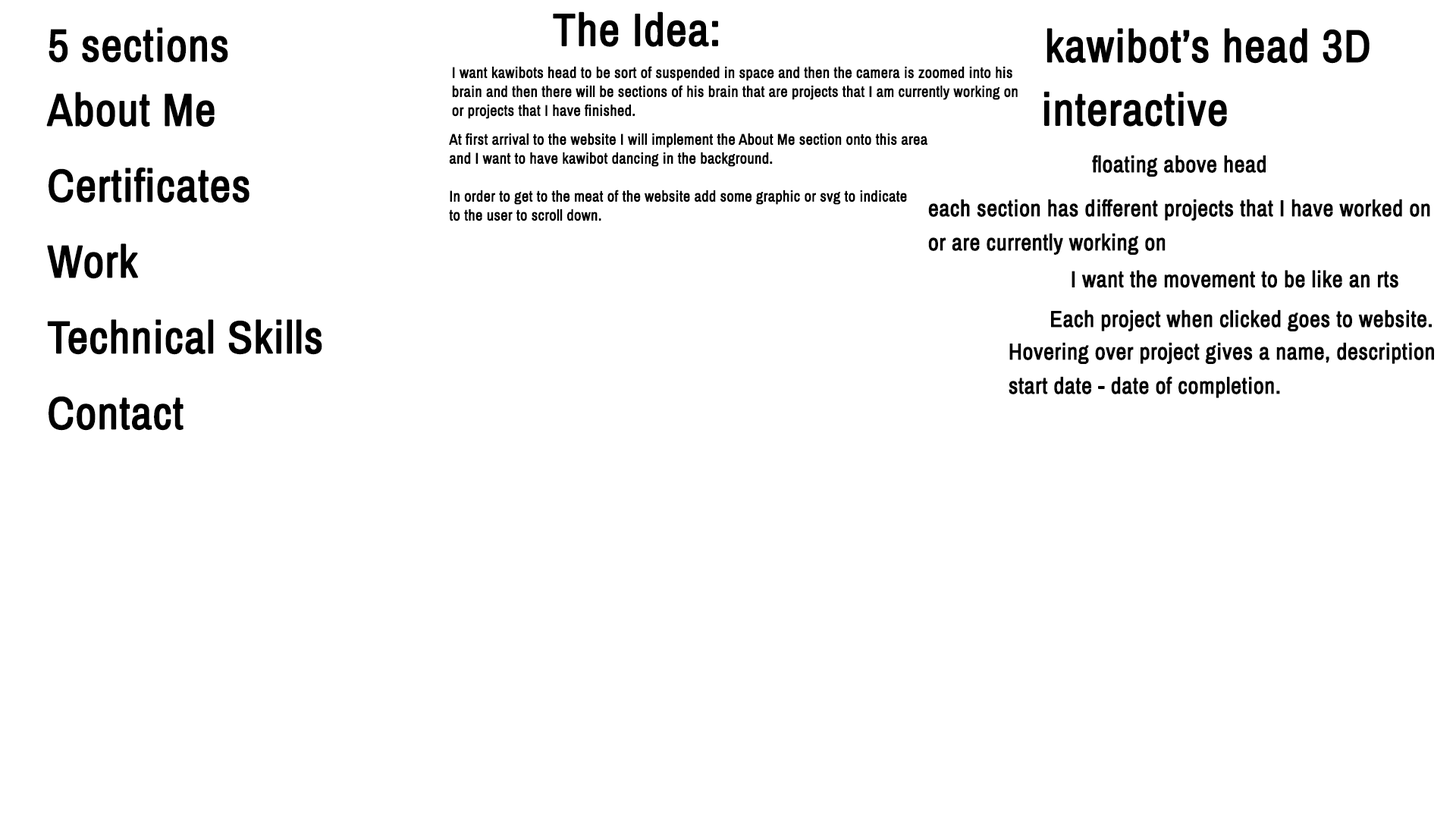
<style>
.page{position:relative;width:1456px;height:819px;background:#ffffff}
.page>*{position:absolute;margin:0}
.t1{font:45.5px "ArchivoNarrow-Regular";color:#000000;font-weight:bold}
.t2{font:15.2px/19px "ArchivoNarrow-Regular";color:#000000;font-weight:bold}
.t3{font:45.5px/75.8px "ArchivoNarrow-Regular";color:#000000;font-weight:bold}
.t4{font:22.7px "ArchivoNarrow-Regular";color:#000000;font-weight:bold}
.t5{font:22.7px/34.1px "ArchivoNarrow-Regular";color:#000000;font-weight:bold}
</style>
<div class="page">
<p class="t1" style="left:553px;top:11px;width:165px;height:36px">The Idea:</p>
<p class="t1" style="left:49px;top:27px;width:179px;height:36px">5 sections</p>
<p class="t1" style="left:1046px;top:28px;width:324px;height:36px">kawibot’s head 3D</p>
<p class="t2" style="left:452px;top:66px;width:566px;height:53px">I want kawibots head to be sort of suspended in space and then the camera is zoomed into his<br>brain and then there will be sections of his brain that are projects that I am currently working on<br>or projects that I have finished.</p>
<p class="t3" style="left:46px;top:92px;width:276px;height:339px">About Me<br>Certificates<br>Work<br>Technical Skills<br>Contact</p>
<p class="t1" style="left:1043px;top:91px;width:184px;height:36px">interactive</p>
<p class="t2" style="left:449px;top:133px;width:478px;height:88px">At first arrival to the website I will implement the About Me section onto this area<br>and I want to have kawibot dancing in the background.<br><br>In order to get to the meat of the website add some graphic or svg to indicate <br>to the user to scroll down.</p>
<p class="t4" style="left:1092px;top:155px;width:174px;height:22px">floating above head</p>
<p class="t5" style="left:928px;top:199px;width:502px;height:56px">each section has different projects that I have worked on<br>or are currently working on</p>
<p class="t4" style="left:1072px;top:270px;width:326px;height:18px">I want the movement to be like an rts</p>
<p class="t4" style="left:1051px;top:309px;width:381px;height:22px">Each project when clicked goes to website.</p>
<p class="t5" style="left:1009px;top:342px;width:425px;height:56px">Hovering over project gives a name, description<br>start date - date of completion.</p>
</div>
